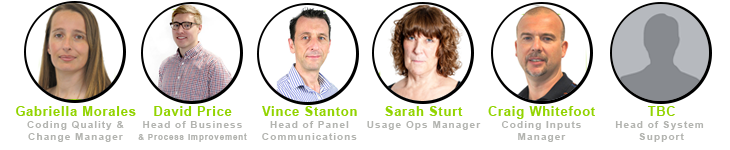
<style>
.page{position:relative;width:730px;height:150px;background:#ffffff}
.page>*{position:absolute;margin:0}
.t1{font:10.4px/12.2px "Arial-BoldMT";letter-spacing:0.08em;color:#b3b4b0}
.t2{font:12.5px/18.5px "Arial-BoldMT";letter-spacing:0.08em;color:#92d400}
.t3{font:8.3px/12.2px "Arial-BoldMT";letter-spacing:0.08em;color:#b3b4b0}
</style>
<div class="page">
<p class="t1" style="left:16px;top:106px;width:120px;height:36px;text-align:center"><span class="t2">Gabriella Morales<br></span>Coding Quality &amp;<br>Change Manager</p>
<p class="t3" style="left:138px;top:106px;width:109px;height:36px;text-align:center"><span class="t2">David Price<br></span><span class="t1">Head of Business<br></span>&amp; Process Improvement</p>
<p class="t1" style="left:262px;top:106px;width:95px;height:34px;text-align:center"><span class="t2">Vince Stanton<br></span>Head of Panel<br>Communications</p>
<p class="t1" style="left:367px;top:106px;width:114px;height:24px;text-align:center"><span class="t2">Sarah Sturt<br></span>Usage Ops Manager</p>
<p class="t1" style="left:488px;top:106px;width:107px;height:36px;text-align:center"><span class="t2">Craig Whitefoot<br></span>Coding Inputs<br>Manager</p>
<p class="t1" style="left:615px;top:106px;width:89px;height:36px;text-align:center"><span class="t2">TBC<br></span>Head of System <br>Support</p>
</div>
